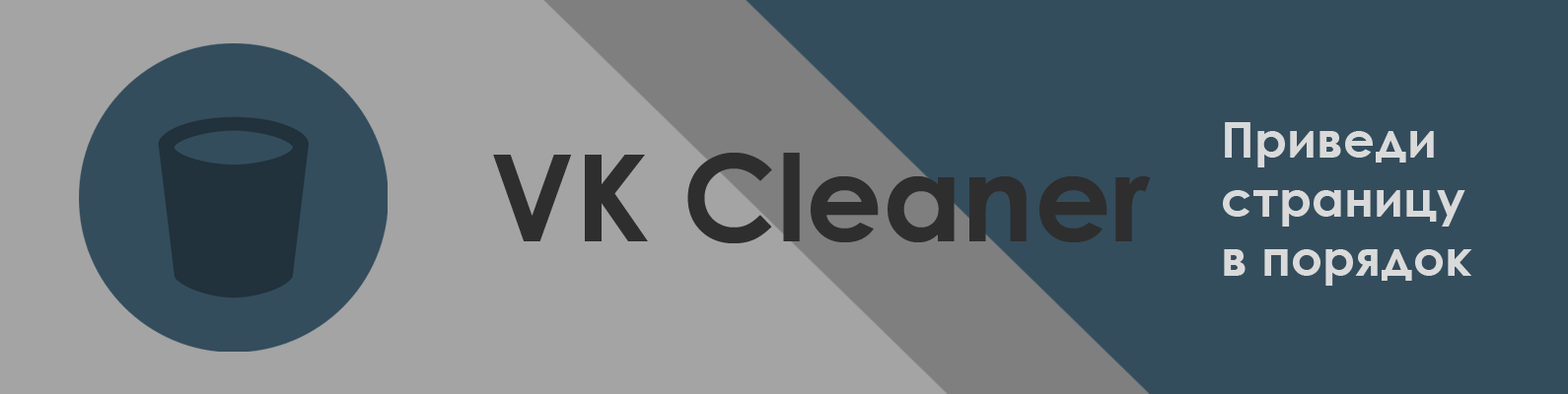
<style>
.page{position:relative;width:1568px;height:394px;background:#334d5c}
.page>*{position:absolute;margin:0}
.t1{font:49.3px "CenturyGothic-Bold";color:#dadada}
.t2{font:120.3px "CenturyGothic-Bold";color:#2e2e2e}
</style>
<div class="page">
<p class="t1" style="left:1223px;top:122px;width:249px;height:164px">Приведи <br>страницу <br>в порядок</p>
<p class="t2" style="left:493px;top:153px;width:658px;height:91px">VK Cleaner</p>
</div>
